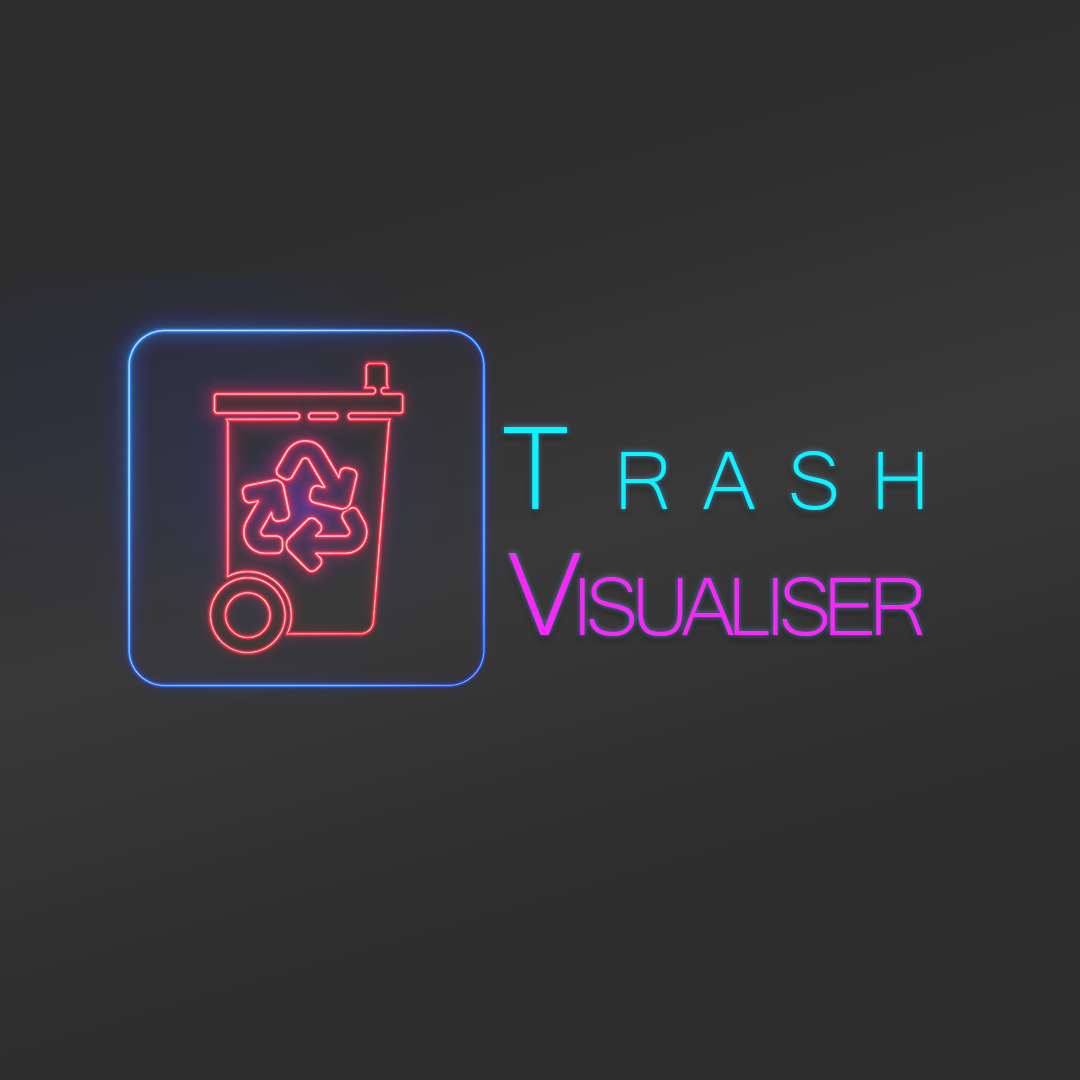
<style>
.page{position:relative;width:1080px;height:1080px;background:#2d2d2d}
.page>*{position:absolute;margin:0}
.t1{font:153.1px "Microsoft-Yi-Baiti";letter-spacing:0.28em;color:#06f5ff;font-variant:small-caps}
.t2{font:153.1px "Microsoft-Yi-Baiti";letter-spacing:-0.08em;color:#f827fb;font-variant:small-caps}
</style>
<div class="page">
<p class="t1" style="left:504px;top:427px;width:419px;height:83px">Trash</p>
<p class="t2" style="left:508px;top:553px;width:415px;height:83px">Visualiser</p>
</div>
